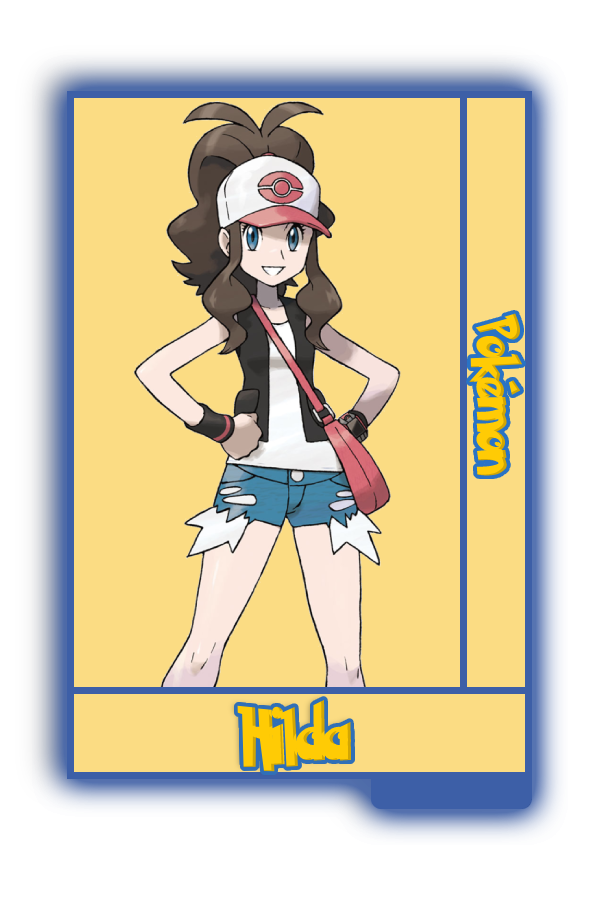
<style>
.page{position:relative;width:600px;height:900px;background:#fbdc83}
.page>*{position:absolute;margin:0}
.t1{font:48.8px "PokemonSolidNormal";color:#ffcb05;scale:0.8 1}
.t2{font:56.6px "PokemonSolidNormal";color:#ffcb05;scale:0.92 1}
</style>
<div class="page">
<p class="t1" style="left:469px;top:313px;width:54px;height:163px;rotate:90deg">Pokémon</p>
<p class="t2" style="left:237px;top:699px;width:115px;height:73px">Hilda</p>
</div>
